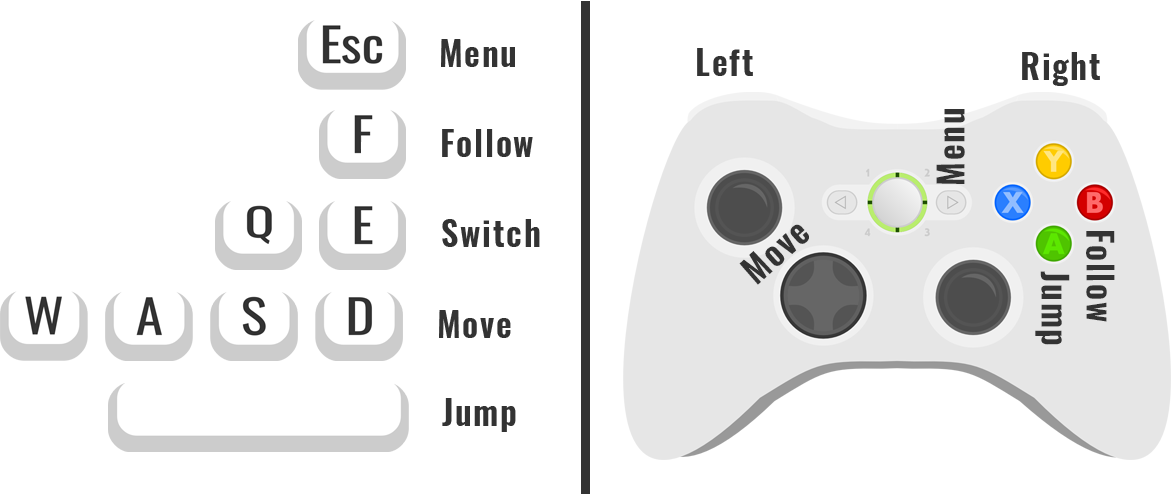
<style>
.page{position:relative;width:1171px;height:495px;background:#ffffff}
.page>*{position:absolute;margin:0}
.t1{font:34.2px "Oswald-SemiBold";letter-spacing:0.05em;color:#333333}
</style>
<div class="page">
<p class="t1" style="left:441px;top:39px;width:74px;height:28px">Menu</p>
<p class="t1" style="left:697px;top:48px;width:56px;height:28px">Left</p>
<p class="t1" style="left:1022px;top:52px;width:78px;height:34px">Right</p>
<p class="t1" style="left:936px;top:109px;width:29px;height:75px;rotate:-90deg">Menu</p>
<p class="t1" style="left:442px;top:129px;width:91px;height:28px">Follow</p>
<p class="t1" style="left:442px;top:219px;width:98px;height:28px">Switch</p>
<p class="t1" style="left:739px;top:224px;width:70px;height:61px;rotate:-42deg">Move</p>
<p class="t1" style="left:1086px;top:231px;width:29px;height:91px;rotate:90deg">Follow</p>
<p class="t1" style="left:1035px;top:271px;width:35px;height:74px;rotate:90deg">Jump</p>
<p class="t1" style="left:439px;top:310px;width:72px;height:28px">Move</p>
<p class="t1" style="left:442px;top:398px;width:74px;height:34px">Jump</p>
</div>
